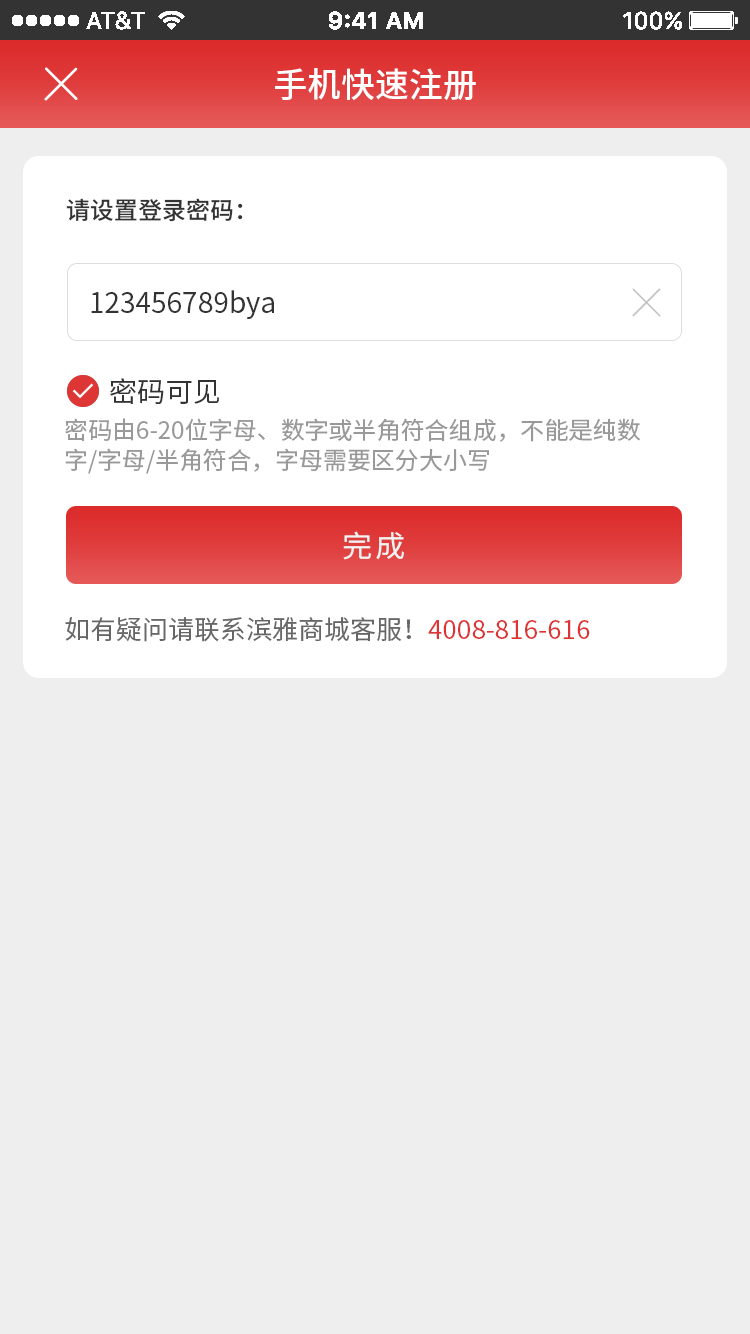
<style>
.page{position:relative;width:750px;height:1334px;background:#eeeeee}
.page>*{position:absolute;margin:0}
.t1{font:34px "SourceHanSansCN-Medium";color:#ffffff}
.t2{font:24px "SourceHanSansCN-Medium";color:#333333}
.t3{font:28px "SourceHanSansCN-Regular";color:#333333}
.t4{font:24px/30px "SourceHanSansCN-Regular";color:#999999}
.t5{font:30px "SourceHanSansCN-Regular";letter-spacing:0.1em;color:#f2f2f2}
.t6{font:26px "SourceHanSansCN-Regular";color:#666666}
.t7{font:26px "SourceHanSansCN-Regular";color:#de3333}
</style>
<div class="page">
<p class="t1" style="left:275px;top:68px;width:201px;height:33px">手机快速注册</p>
<p class="t2" style="left:66px;top:198px;width:177px;height:24px">请设置登录密码：</p>
<p class="t3" style="left:91px;top:290px;width:183px;height:29px">123456789bya</p>
<p class="t3" style="left:110px;top:378px;width:109px;height:26px">密码可见</p>
<p class="t4" style="left:65px;top:418px;width:576px;height:56px">密码由6-20位字母、数字或半角符合组成，不能是纯数<br>字/字母/半角符合，字母需要区分大小写</p>
<p class="t5" style="left:343px;top:531px;width:61px;height:29px">完成</p>
<p class="t6" style="left:65px;top:617px;width:525px;height:25px">如有疑问请联系滨雅商城客服！<span class="t7">4008-816-616</span></p>
</div>
